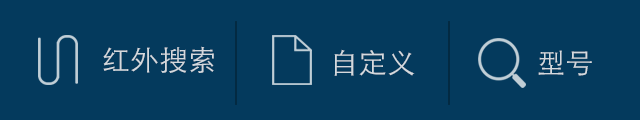
<style>
.page{position:relative;width:640px;height:120px;background:#043a5d}
.page>*{position:absolute;margin:0}
.t1{font:28px "STHeitiSC-Light";letter-spacing:0.025em;color:#d4d9de}
</style>
<div class="page">
<p class="t1" style="left:103px;top:46px;width:111px;height:27px">红外搜索</p>
<p class="t1" style="left:334px;top:49px;width:81px;height:27px">自定义</p>
<p class="t1" style="left:538px;top:50px;width:54px;height:26px">型号</p>
</div>
